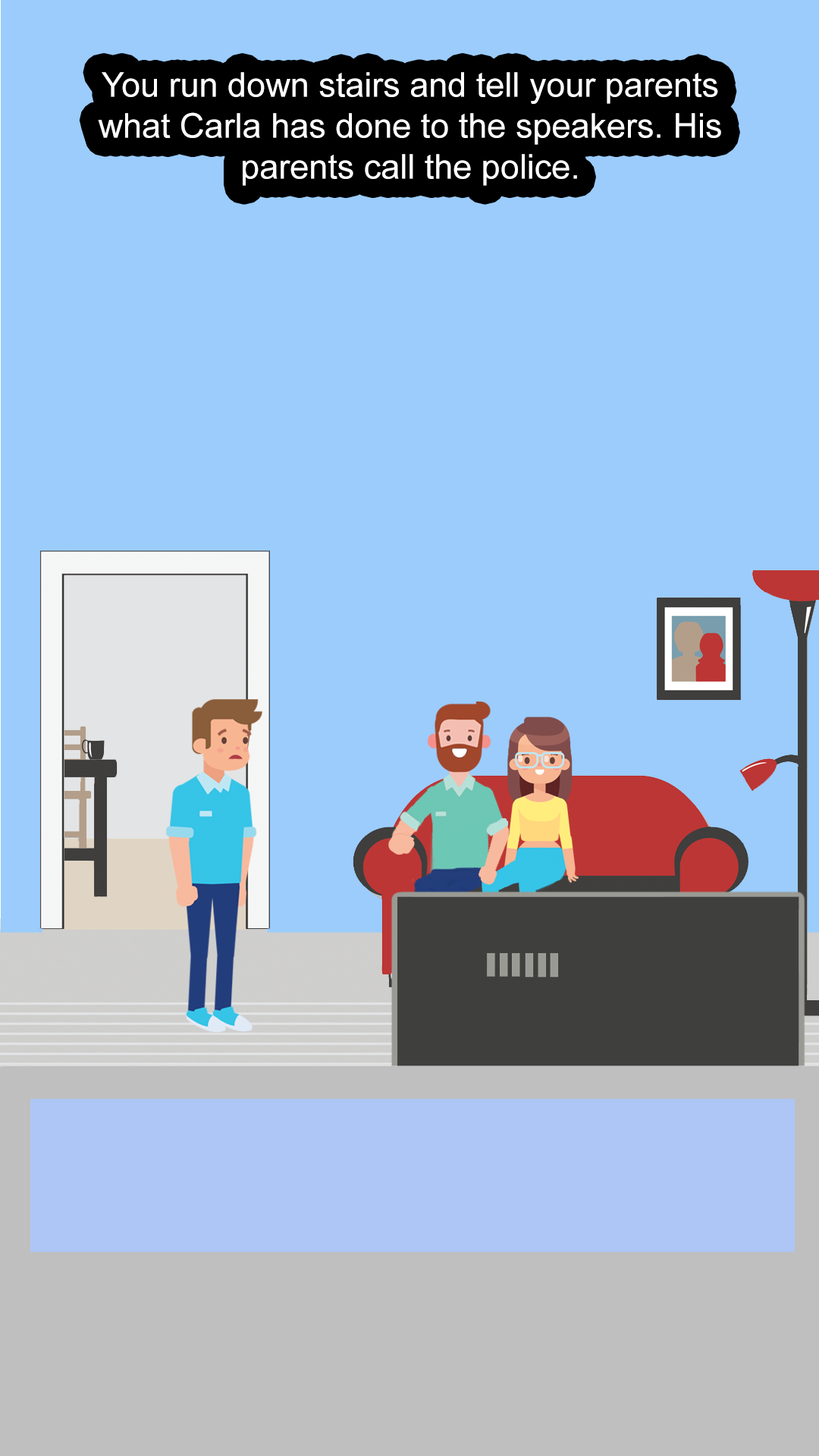
<style>
.page{position:relative;width:819px;height:1456px;background:#9bccfc}
.page>*{position:absolute;margin:0}
.t1{font:34.1px "ArialMT";color:#ffffff}
</style>
<div class="page">
<p class="t1" style="left:98px;top:72px;width:623px;height:114px;text-align:center">You run down stairs and tell your parents what Carla has done to the speakers. His parents call the police.</p>
</div>
